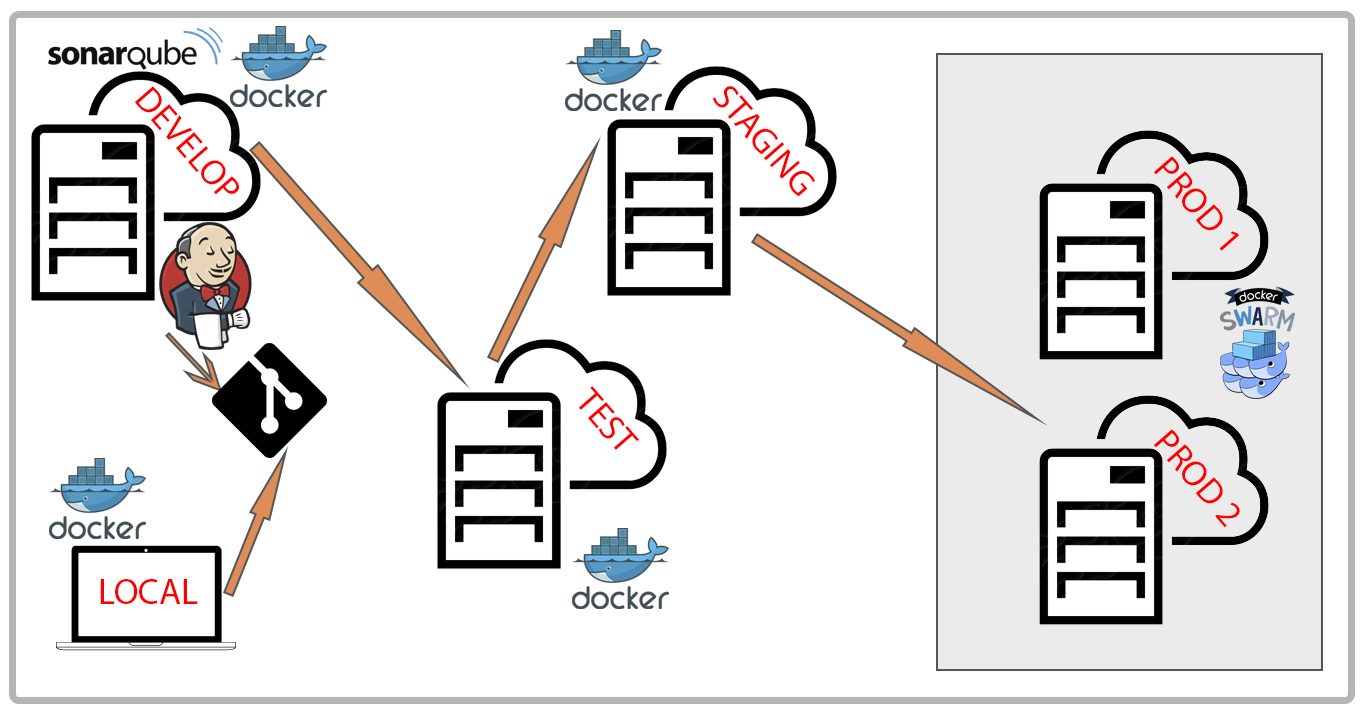
<style>
.page{position:relative;width:1366px;height:720px;background:#ffffff}
.page>*{position:absolute;margin:0}
.t1{font:36px "MyriadPro-Regular";color:#ff0000}
</style>
<div class="page">
<p class="t1" style="left:134px;top:86px;width:105px;height:109px;rotate:49deg">DEVELOP</p>
<p class="t1" style="left:713px;top:86px;width:102px;height:111px;rotate:49deg">STAGING</p>
<p class="t1" style="left:1153px;top:156px;width:87px;height:95px;rotate:49deg">PROD 1</p>
<p class="t1" style="left:578px;top:386px;width:61px;height:64px;rotate:49deg">TEST</p>
<p class="t1" style="left:1153px;top:429px;width:87px;height:99px;rotate:49deg">PROD 2</p>
<p class="t1" style="left:100px;top:579px;width:98px;height:25px">LOCAL</p>
</div>
